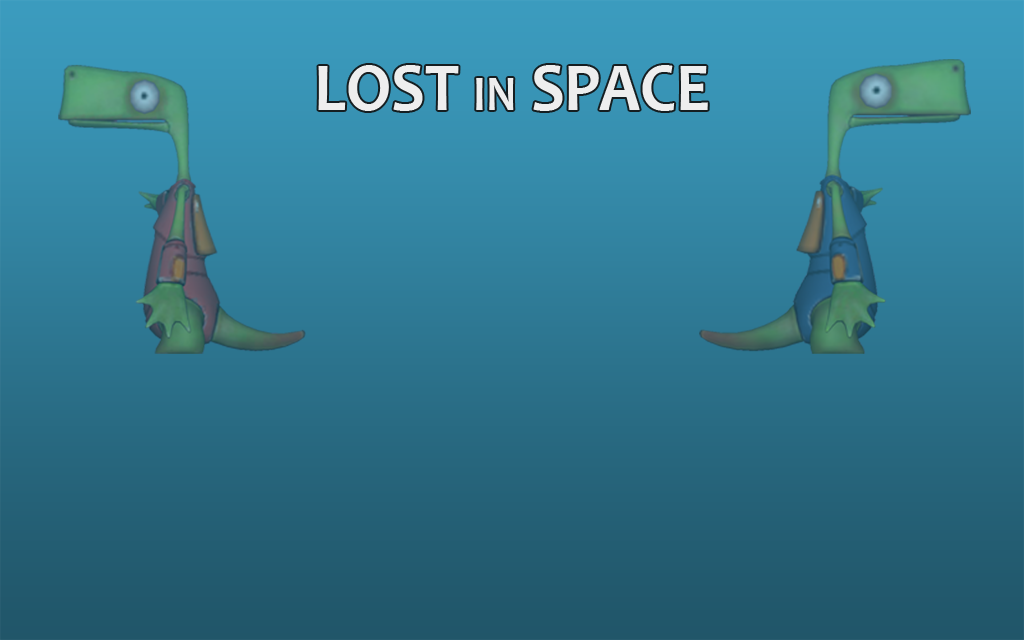
<style>
.page{position:relative;width:1024px;height:640px}
.page>*{position:absolute;margin:0}
.t1{font:68.7px "Candara-Bold";color:#eeeeee;scale:0.94 1}
.t2{font:49.2px "Candara-Bold";color:#eeeeee;scale:0.94 1}
</style>
<div class="page">
<p class="t1" style="left:318px;top:65px;width:390px;height:46px">LOST <span class="t2">IN</span> SPACE</p>
</div>
